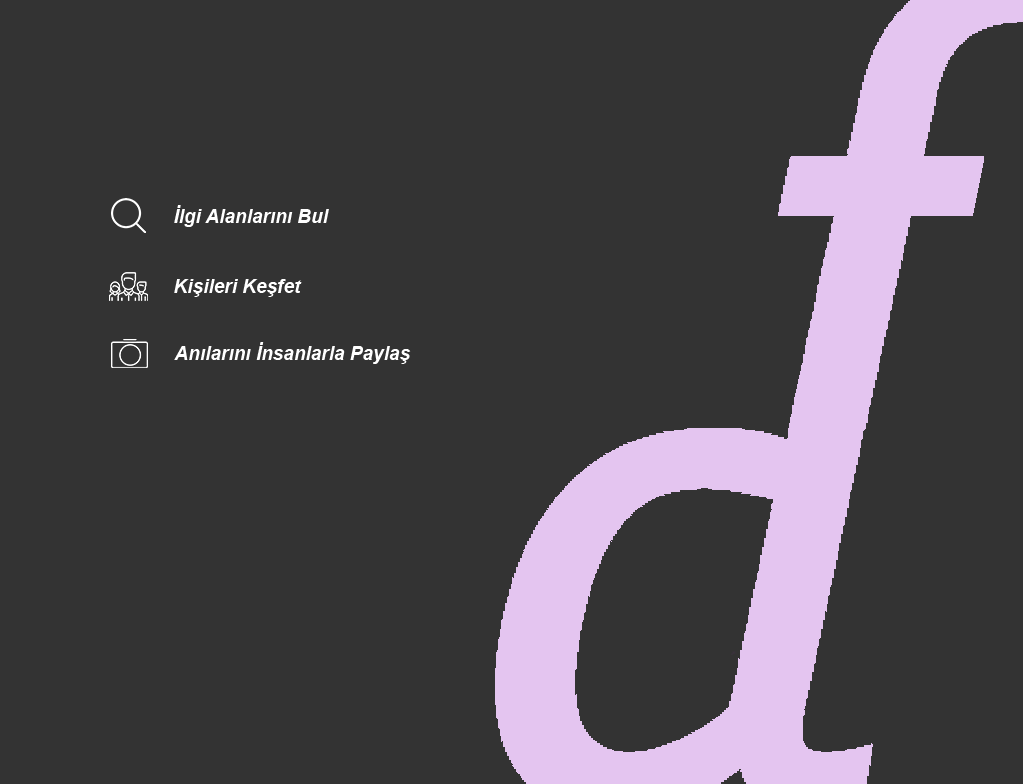
<style>
.page{position:relative;width:1023px;height:784px;background:#333333}
.page>*{position:absolute;margin:0}
.t1{font:19px "Arial-BoldItalicMT";color:#ffffff}
</style>
<div class="page">
<p class="t1" style="left:174px;top:205px;width:155px;height:22px">İlgi Alanlarını Bul</p>
<p class="t1" style="left:174px;top:279px;width:128px;height:18px">Kişileri Keşfet</p>
<p class="t1" style="left:174px;top:342px;width:237px;height:22px">Anılarını İnsanlarla Paylaş</p>
</div>
